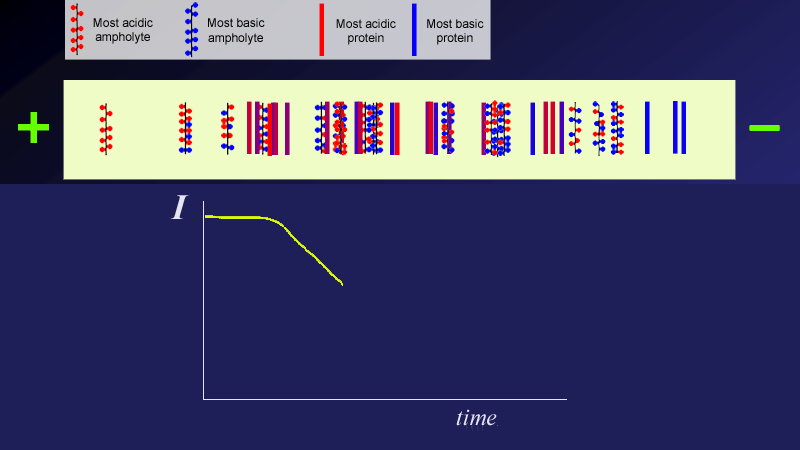
<style>
.page{position:relative;width:800px;height:450px;background:#1e1e58}
.page>*{position:absolute;margin:0}
.t1{font:12px "ArialMT";color:#000000}
.t2{font:12px "ArialMT";color:#050505}
</style>
<div class="page">
<p class="t1" style="left:93px;top:18px;width:60px;height:30px;text-align:center">Most acidic<br>ampholyte</p>
<p class="t1" style="left:207px;top:19px;width:61px;height:30px;text-align:center">Most basic <br>ampholyte</p>
<p class="t2" style="left:336px;top:19px;width:60px;height:30px;text-align:center">Most acidic<br>protein</p>
<p class="t1" style="left:426px;top:19px;width:57px;height:30px;text-align:center">Most basic<br>protein</p>
</div>
